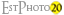
<style>
.page{position:relative;width:64px;height:15px;background:#ffffff}
.page>*{position:absolute;margin:0}
.t1{font:12.3px "TrajanPro-Regular";color:#969696}
.t2{font:8.2px "TrajanPro-Regular";color:#969696}
.t3{font:16.4px "TrajanPro-Regular";color:#969696}
</style>
<div class="page">
<p class="t1" style="left:1px;top:1px;width:8px;height:13px">E</p>
<p class="t2" style="left:8px;top:5px;width:11px;height:6px">st</p>
<p class="t3" style="left:18px;top:1px;width:8px;height:13px">P</p>
<p class="t2" style="left:26px;top:5px;width:24px;height:6px">hoto</p>
</div>
